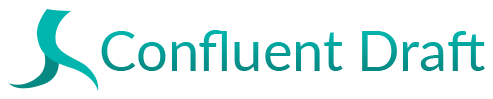
<style>
.page{position:relative;width:493px;height:99px;background:#ffffff}
.page>*{position:absolute;margin:0}
.t1{font:56px "Lato-Regular";color:#049b94}
</style>
<div class="page">
<p class="t1" style="left:101px;top:30px;width:384px;height:41px">Confluent Draft</p>
</div>
